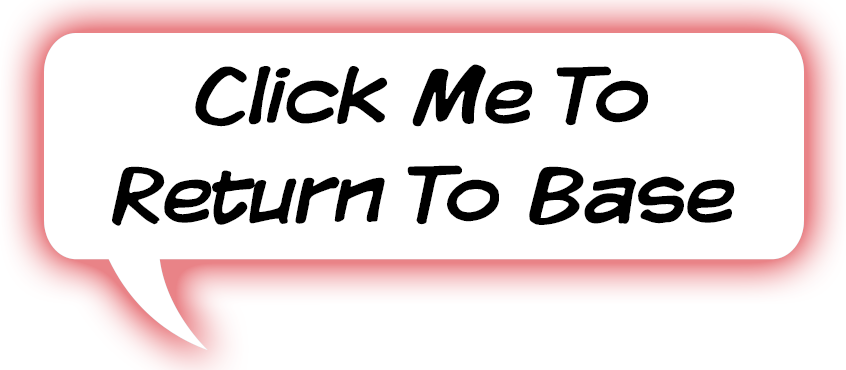
<style>
.page{position:relative;width:846px;height:370px;background:#ffffff}
.page>*{position:absolute;margin:0}
.t1{font:82.8px "KomikaDisplay";color:#000000}
</style>
<div class="page">
<p class="t1" style="left:112px;top:64px;width:623px;height:162px;text-align:center">Click Me To<br>Return To Base</p>
</div>
